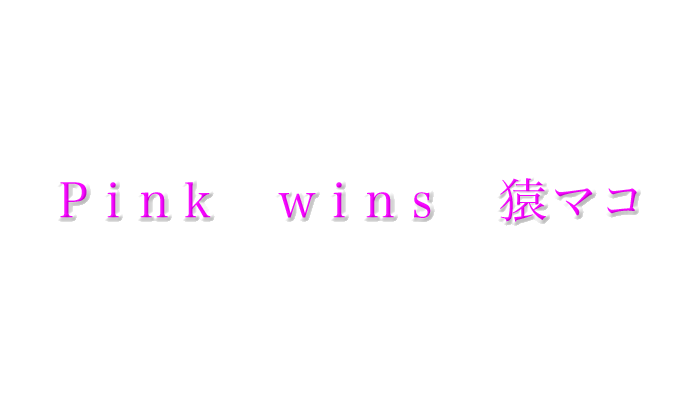
<style>
.page{position:relative;width:700px;height:400px;background:#ffffff}
.page>*{position:absolute;margin:0}
.t1{font:48px "HiraMinProN-W3";letter-spacing:0.12em;color:#f400fd}
</style>
<div class="page">
<p class="t1" style="left:60px;top:178px;width:577px;height:44px">Ｐｉｎｋ　ｗｉｎｓ　猿マコ</p>
</div>
